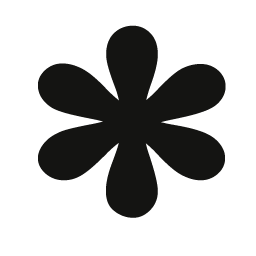
<style>
.page{position:relative;width:256px;height:256px;background:#ffffff}
.page>*{position:absolute;margin:0}
.t1{font:444.1px "TimesNewRomanPSMT";color:#141412;font-weight:bold;scale:1.1 1}
</style>
<div class="page">
<p class="t1" style="left:38px;top:25px;width:188px;height:193px">*</p>
</div>
